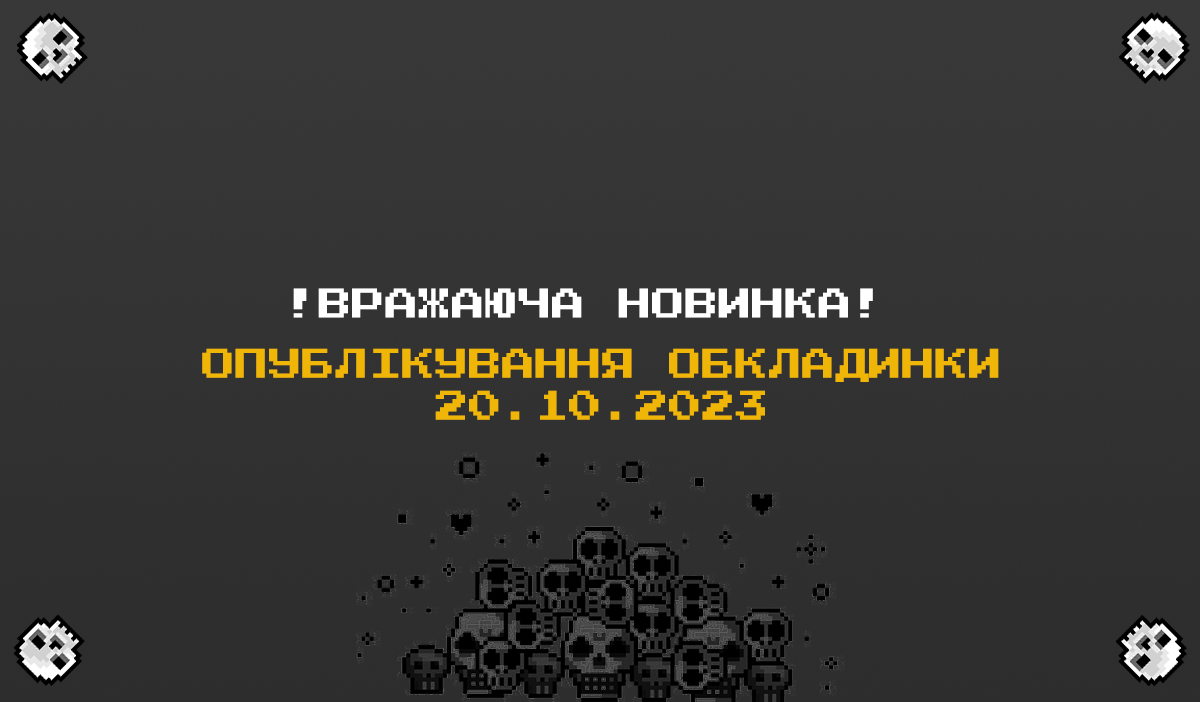
<style>
.page{position:relative;width:1200px;height:702px}
.page>*{position:absolute;margin:0}
.t1{font:33.3px "PressStart2P-Regular";color:#ffffff}
.t2{font:33.3px "PressStart2P-Regular";color:#f0b607}
</style>
<div class="page">
<p class="t1" style="left:293px;top:288px;width:580px;height:30px">!ВРАЖАЮЧА НОВИНКА!</p>
<p class="t2" style="left:202px;top:348px;width:797px;height:34px">ОПУБЛІКУВАННЯ ОБКЛАДИНКИ</p>
<p class="t2" style="left:435px;top:390px;width:330px;height:30px">20.10.2023</p>
</div>
